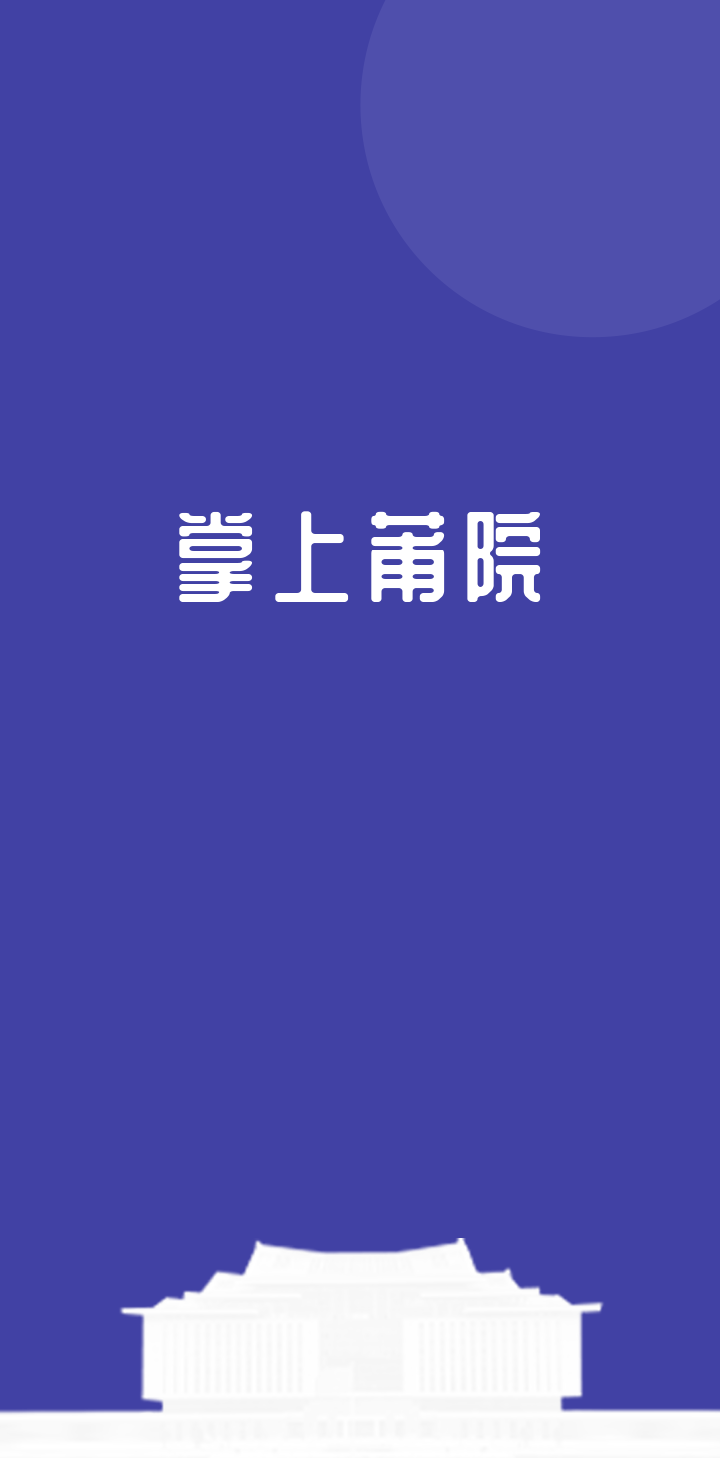
<style>
.page{position:relative;width:720px;height:1458px;background:#4141a4}
.page>*{position:absolute;margin:0}
.t1{font:98.8px "WD-XLLubrifontSC-Regular";letter-spacing:0.12em;color:#ffffff;scale:1.1 1}
</style>
<div class="page">
<p class="t1" style="left:179px;top:511px;width:362px;height:91px">掌上莆院</p>
</div>
